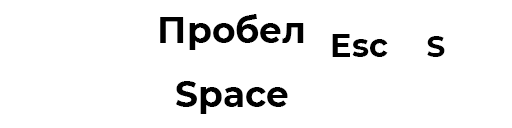
<style>
.page{position:relative;width:512px;height:128px;background:#ffffff}
.page>*{position:absolute;margin:0}
.t1{font:36px "Montserrat-Bold";color:#000000}
.t2{font:29.3px "Montserrat-Bold";color:#000000}
</style>
<div class="page">
<p class="t1" style="left:160px;top:14px;width:144px;height:36px">Пробел</p>
<p class="t2" style="left:427px;top:36px;width:18px;height:21px">S</p>
<p class="t1" style="left:176px;top:81px;width:112px;height:33px">Space</p>
</div>
